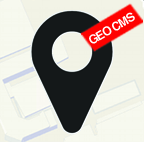
<style>
.page{position:relative;width:144px;height:144px}
.page>*{position:absolute;margin:0}
.t1{font:12px "Helvetica-Bold";letter-spacing:-0.075em;color:#ffffff;text-transform:uppercase}
</style>
<div class="page">
<p class="t1" style="left:89px;top:12px;width:46px;height:32px;rotate:-30deg">Geo CMS</p>
</div>
